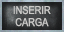
<style>
.page{position:relative;width:64px;height:32px}
.page>*{position:absolute;margin:0}
.t1{font:11px/12px "ArialMT";letter-spacing:-0.04em;color:#cac9c7;text-transform:uppercase;scale:0.85 1}
</style>
<div class="page">
<p class="t1" style="left:13px;top:5px;width:38px;height:22px;text-align:center">inserir<br>carga</p>
</div>
